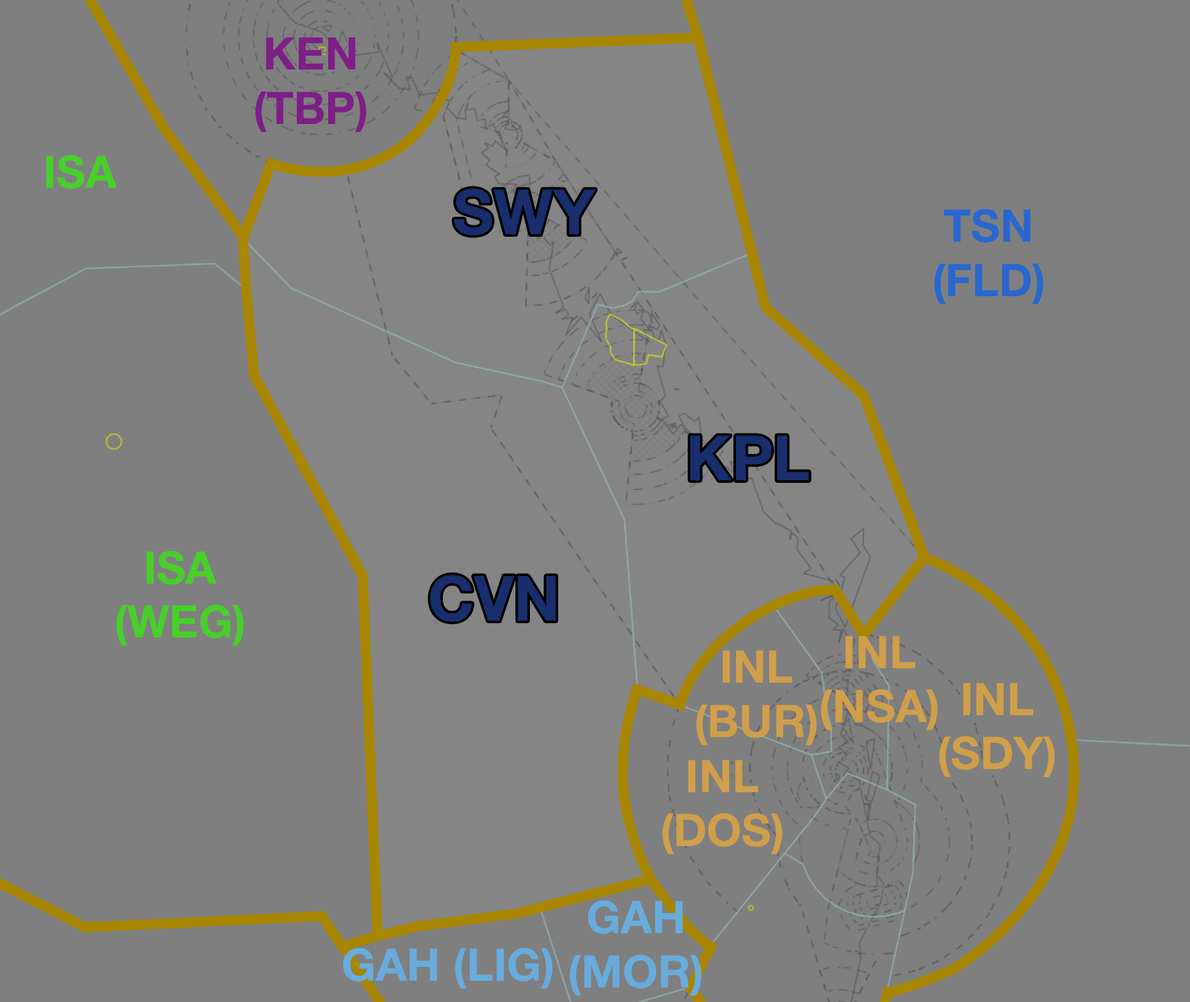
<style>
.page{position:relative;width:1190px;height:1002px;background:#7f7f7f}
.page>*{position:absolute;margin:0}
.t1{font:45.1px "HelveticaNeue-Bold";color:#7e1e87}
.t2{font:45.1px "HelveticaNeue-Bold";color:#48cf29}
.t3{font:62.6px "HelveticaNeue-Bold";color:#182e6d}
.t4{font:45.1px "HelveticaNeue-Bold";color:#2967cf}
.t5{font:45.1px "HelveticaNeue-Bold";color:#d09f4a}
.t6{font:45.1px "HelveticaNeue-Bold";color:#67acdc}
</style>
<div class="page">
<p class="t1" style="left:255px;top:37px;width:111px;height:95px;text-align:center">KEN<br>(TBP)</p>
<p class="t2" style="left:46px;top:155px;width:71px;height:34px">ISA</p>
<p class="t3" style="left:454px;top:189px;width:142px;height:46px">SWY</p>
<p class="t4" style="left:934px;top:209px;width:109px;height:95px;text-align:center">TSN<br>(FLD)</p>
<p class="t3" style="left:690px;top:435px;width:119px;height:45px">KPL</p>
<p class="t2" style="left:116px;top:551px;width:128px;height:95px;text-align:center">ISA<br>(WEG)</p>
<p class="t3" style="left:430px;top:575px;width:126px;height:47px">CVN</p>
<p class="t5" style="left:820px;top:636px;width:118px;height:94px;text-align:center">INL<br>(NSA)</p>
<p class="t5" style="left:696px;top:650px;width:121px;height:95px;text-align:center">INL<br>(BUR)</p>
<p class="t5" style="left:939px;top:683px;width:116px;height:94px;text-align:center">INL<br>(SDY)</p>
<p class="t5" style="left:662px;top:760px;width:120px;height:94px;text-align:center">INL<br>(DOS)</p>
<p class="t6" style="left:569px;top:900px;width:132px;height:96px;text-align:center">GAH<br>(MOR)</p>
<p class="t6" style="left:343px;top:948px;width:209px;height:41px">GAH (LIG)</p>
</div>
